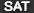
<style>
.page{position:relative;width:34px;height:13px}
.page>*{position:absolute;margin:0}
.t1{font:13.9px "K2D-ExtraBold";color:#ffffff}
</style>
<div class="page">
<p class="t1" style="left:4px;top:1px;width:26px;height:11px">SAT</p>
</div>
